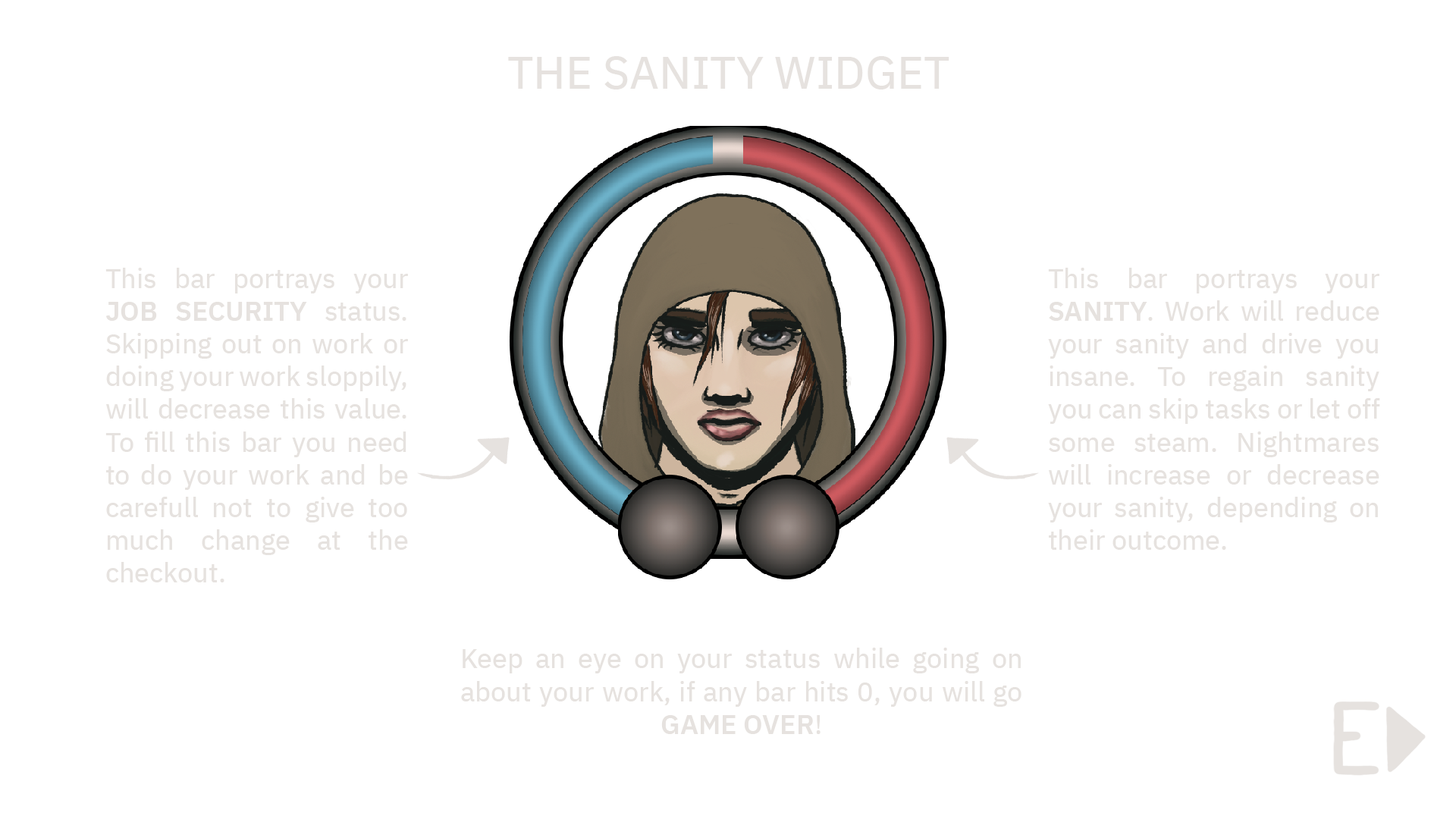
<style>
.page{position:relative;width:1456px;height:819px;background:#ffffff}
.page>*{position:absolute;margin:0}
.t1{font:45.5px "IBMPlexSans-Text";color:#e6e2df}
.t2{font:27.3px "IBMPlexSans-Text";color:#e6e2df}
.t3{font:27.3px "IBMPlexSans-SmBld";color:#e6e2df;text-transform:uppercase}
</style>
<div class="page">
<p class="t1" style="left:508px;top:56px;width:441px;height:33px">THE SANITY WIDGET</p>
<p class="t2" style="left:105px;top:268px;width:303px;height:314px;text-align:justify">This bar portrays your <span class="t3">Job Security </span>status. Skipping out on work or doing your work sloppily, will decrease this value. To fill this bar you need to do your work and be carefull not to give too much change at the checkout.</p>
<p class="t2" style="left:1048px;top:268px;width:332px;height:282px;text-align:justify">This bar portrays your <span class="t3">Sanity</span>. Work will reduce your sanity and drive you insane. To regain sanity you can skip tasks or let off some steam. Nightmares will increase or decrease your sanity, depending on their outcome.</p>
<p class="t2" style="left:461px;top:648px;width:560px;height:86px;text-align:justify">Keep an eye on your status while going on about your work, if any bar hits 0, you will go <span class="t3">Game Over</span>!</p>
</div>
